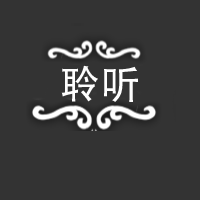
<style>
.page{position:relative;width:200px;height:200px;background:#333333}
.page>*{position:absolute;margin:0}
.t1{font:40px "AdobeHeitiStd-Regular";color:#fefefe}
</style>
<div class="page">
<p class="t1" style="left:61px;top:65px;width:77px;height:37px">聆听</p>
</div>
